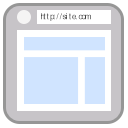
<style>
.page{position:relative;width:128px;height:128px;background:#ffffff}
.page>*{position:absolute;margin:0}
.t1{font:8.1px "Helvetica";letter-spacing:-0.025em;color:#393939}
</style>
<div class="page">
<p class="t1" style="left:41px;top:13px;width:50px;height:8px">http://site.com</p>
</div>
